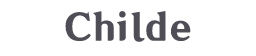
<style>
.page{position:relative;width:256px;height:56px;background:#ffffff}
.page>*{position:absolute;margin:0}
.t1{font:36px "HYWenHei-HEW";color:#4f4e57}
</style>
<div class="page">
<p class="t1" style="left:65px;top:11px;width:126px;height:31px">Childe</p>
</div>
